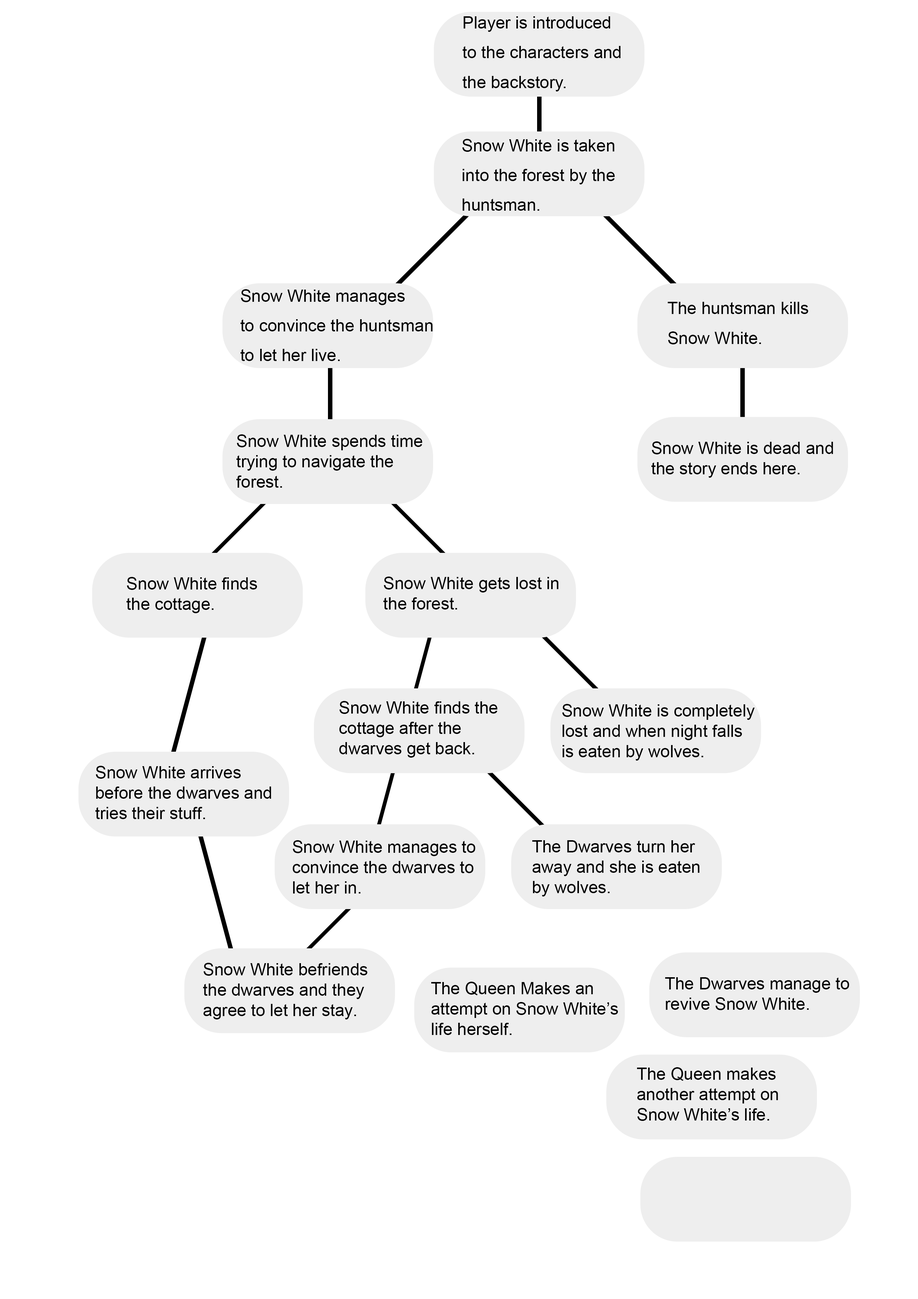
<style>
.page{position:relative;width:918px;height:1299px;background:#ffffff}
.page>*{position:absolute;margin:0}
.t1{font:17px "ArialMT";color:#000000}
</style>
<div class="page">
<p class="t1" style="left:462px;top:16px;width:159px;height:75px">Player is introduced <br>to the characters and <br>the backstory.</p>
<p class="t1" style="left:462px;top:139px;width:153px;height:72px">Snow White is taken <br>into the forest by the <br>huntsman.</p>
<p class="t1" style="left:240px;top:289px;width:193px;height:72px">Snow White manages <br>to convince the huntsman <br>to let her live.</p>
<p class="t1" style="left:668px;top:302px;width:141px;height:42px">The huntsman kills <br>Snow White.</p>
<p class="t1" style="left:236px;top:434px;width:186px;height:54px">Snow White spends time <br>trying to navigate the <br>forest.</p>
<p class="t1" style="left:651px;top:441px;width:182px;height:37px">Snow White is dead and <br>the story ends here.</p>
<p class="t1" style="left:126px;top:577px;width:131px;height:36px">Snow White finds <br>the cottage.</p>
<p class="t1" style="left:383px;top:576px;width:176px;height:33px">Snow White gets lost in <br>the forest.</p>
<p class="t1" style="left:339px;top:701px;width:159px;height:56px">Snow White finds the <br>cottage after the <br>dwarves get back.</p>
<p class="t1" style="left:562px;top:704px;width:193px;height:56px">Snow White is completely <br>lost and when night falls <br>is eaten by wolves.</p>
<p class="t1" style="left:95px;top:766px;width:176px;height:53px">Snow White arrives <br>before the dwarves and <br>tries their stuff.</p>
<p class="t1" style="left:292px;top:840px;width:183px;height:53px">Snow White manages to <br>convince the dwarves to <br>let her in.</p>
<p class="t1" style="left:532px;top:840px;width:168px;height:56px">The Dwarves turn her <br>away and she is eaten <br>by wolves.</p>
<p class="t1" style="left:203px;top:963px;width:165px;height:56px">Snow White befriends <br>the dwarves and they <br>agree to let her stay.</p>
<p class="t1" style="left:665px;top:977px;width:184px;height:33px">The Dwarves manage to <br>revive Snow White.</p>
<p class="t1" style="left:431px;top:981px;width:187px;height:54px">The Queen Makes an <br>attempt on Snow White’s <br>life herself.</p>
<p class="t1" style="left:637px;top:1067px;width:141px;height:54px">The Queen makes <br>another attempt on <br>Snow White’s life.</p>
</div>
